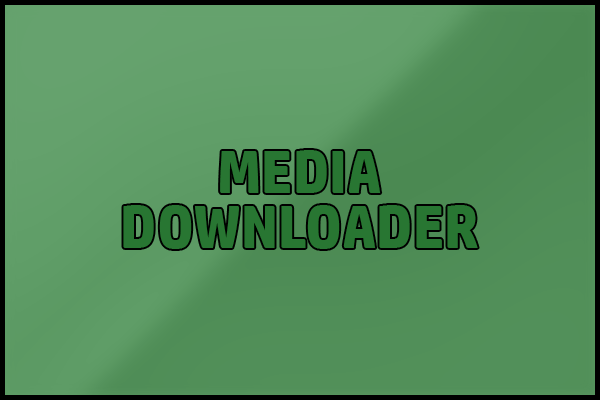
<style>
.page{position:relative;width:600px;height:400px}
.page>*{position:absolute;margin:0}
.t1{font:60px/55px "HPSimplified-Bold";color:#287632;text-transform:uppercase}
</style>
<div class="page">
<p class="t1" style="left:123px;top:150px;width:355px;height:99px;text-align:center">MEDIA<br>DOWNLOADER</p>
</div>
